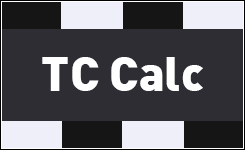
<style>
.page{position:relative;width:245px;height:150px;background:#2d2d33}
.page>*{position:absolute;margin:0}
.t1{font:48px "DIN-Black";color:#ffffff}
</style>
<div class="page">
<p class="t1" style="left:42px;top:57px;width:161px;height:34px">TC Calc</p>
</div>
